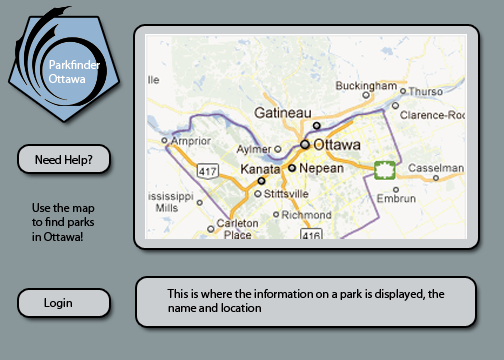
<style>
.page{position:relative;width:504px;height:360px;background:#89979b}
.page>*{position:absolute;margin:0}
.t1{font:12px "MyriadPro-Regular";color:#ffffff}
.t2{font:12px "MyriadPro-Regular";color:#000000}
</style>
<div class="page">
<p class="t1" style="left:49px;top:60px;width:51px;height:23px">Parkfinder<br>Ottawa</p>
<p class="t2" style="left:35px;top:155px;width:58px;height:11px">Need Help?</p>
<p class="t2" style="left:32px;top:203px;width:63px;height:38px">Use the map<br>to find parks<br>in Ottawa!</p>
<p class="t2" style="left:167px;top:289px;width:278px;height:23px">This is where the information on a park is displayed, the <br>name and location</p>
<p class="t2" style="left:44px;top:298px;width:28px;height:11px">Login</p>
</div>
